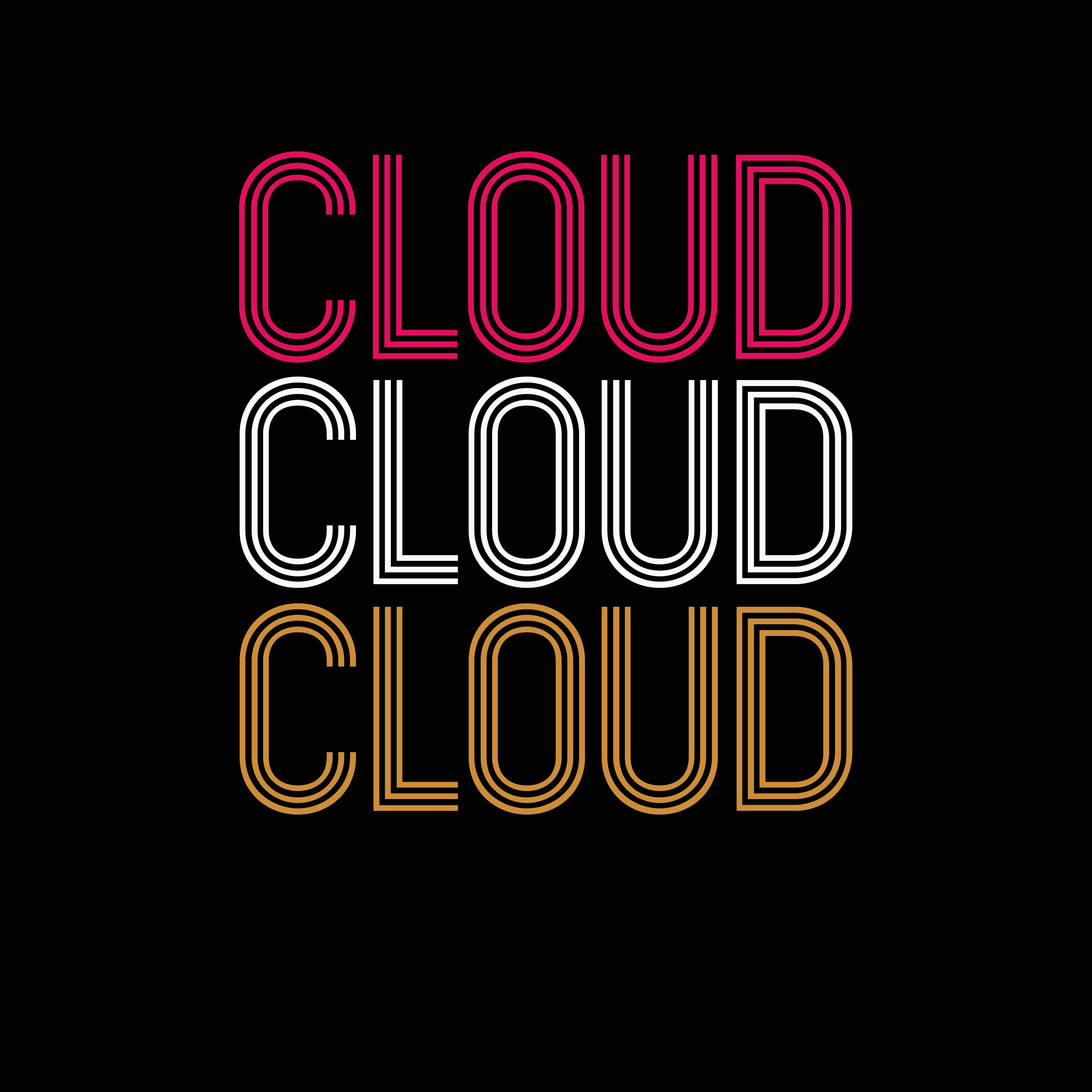
<style>
.page{position:relative;width:1092px;height:1092px;background:#020202}
.page>*{position:absolute;margin:0}
.t1{font:255.9px "Mexcellent-Regular";color:#e0105e}
.t2{font:255.9px "Mexcellent-Regular";color:#fcfaf7}
.t3{font:255.9px "Mexcellent-Regular";color:#cc8d3a}
</style>
<div class="page">
<p class="t1" style="left:239px;top:151px;width:613px;height:212px">CLOUD</p>
<p class="t2" style="left:240px;top:377px;width:612px;height:211px">CLOUD</p>
<p class="t3" style="left:240px;top:603px;width:612px;height:212px">CLOUD</p>
</div>
